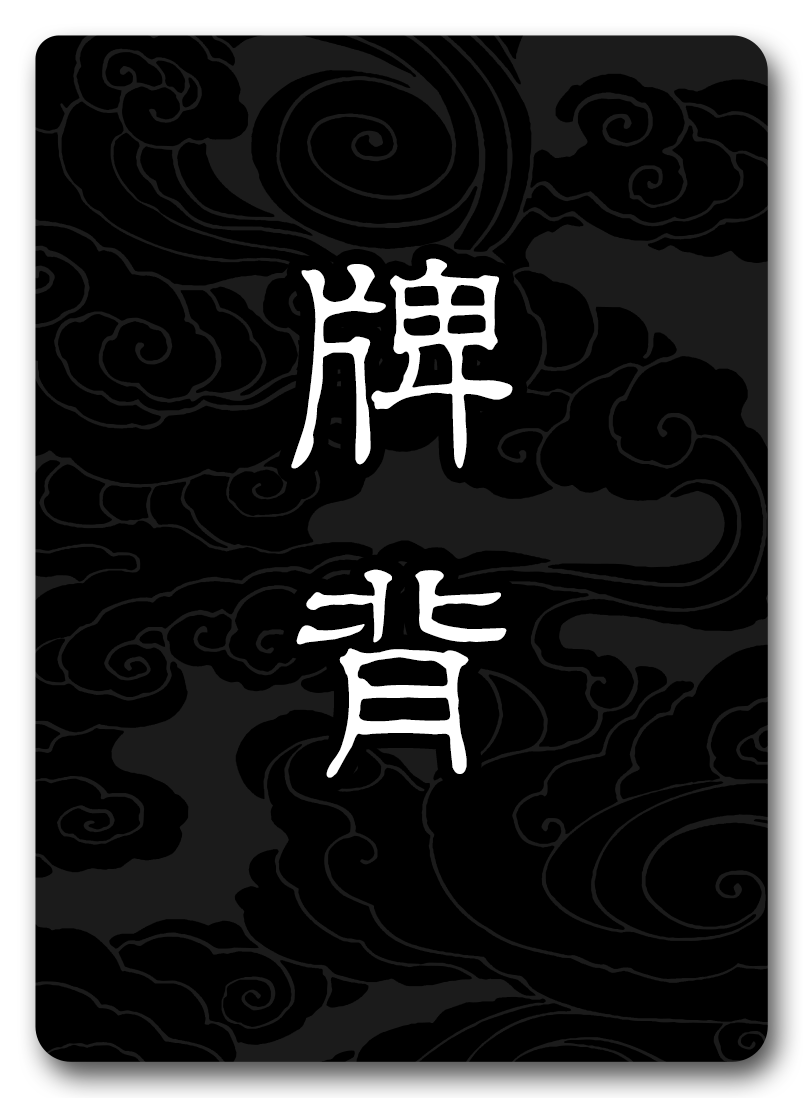
<style>
.page{position:relative;width:803px;height:1098px;background:#000000}
.page>*{position:absolute;margin:0}
.t1{font:250px/114.1px "_GBK";letter-spacing:0.24em;color:#ffffff}
</style>
<div class="page">
<p class="t1" style="left:291px;top:258px;width:222px;height:520px;text-align:center">牌背</p>
</div>
